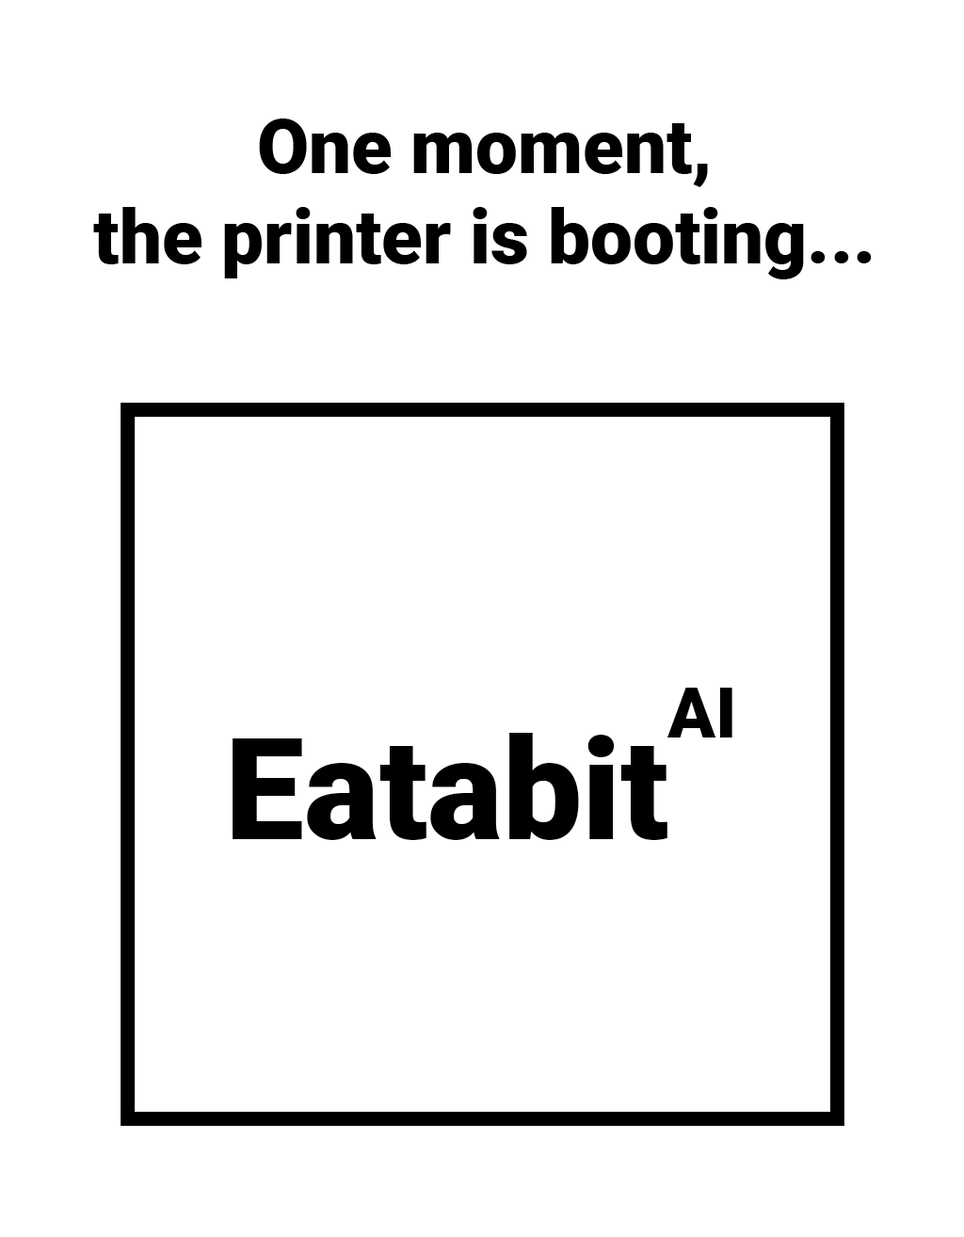
<style>
.page{position:relative;width:964px;height:1237px;background:#ffffff}
.page>*{position:absolute;margin:0}
.t1{font:75.3px "Roboto-Black";color:#000000}
.t2{font:70.6px "Roboto-Black";color:#000000}
.t3{font:141.2px "Roboto-Black";color:#000000}
</style>
<div class="page">
<p class="t1" style="left:93px;top:119px;width:778px;height:160px;text-align:center">One moment,<br>the printer is booting...</p>
<p class="t2" style="left:666px;top:688px;width:66px;height:50px">AI</p>
<p class="t3" style="left:232px;top:733px;width:435px;height:107px">Eatabit</p>
</div>
